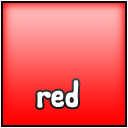
<style>
.page{position:relative;width:128px;height:128px}
.page>*{position:absolute;margin:0}
.t1{font:36px "ChubbyCheeks";color:#ffffff}
</style>
<div class="page">
<p class="t1" style="left:37px;top:80px;width:42px;height:28px">red</p>
</div>
